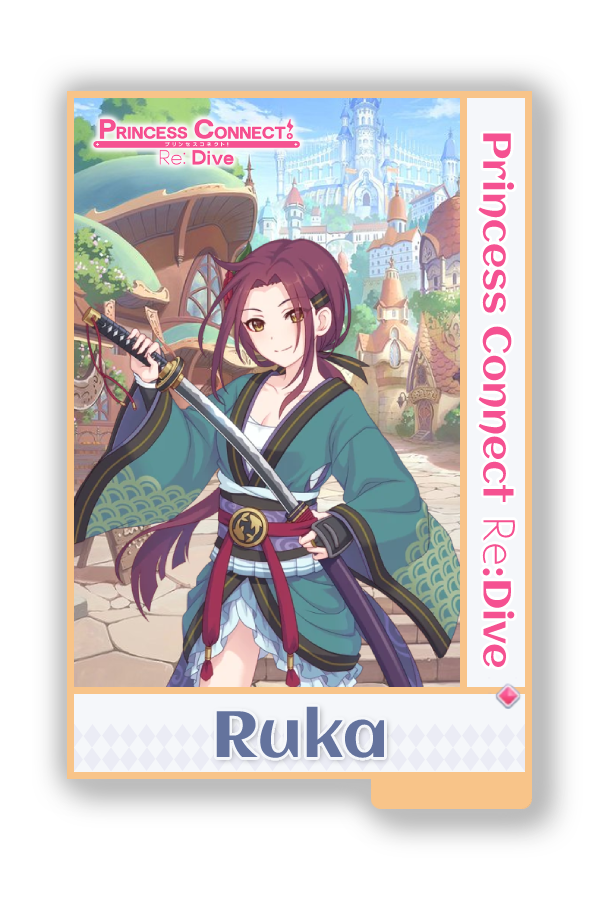
<style>
.page{position:relative;width:600px;height:900px;background:#ffffff}
.page>*{position:absolute;margin:0}
.t1{font:39px "Aclonica-Regular";color:#f55191}
.t2{font:39px "AaarghNormal";color:#f55191}
.t3{font:65px "Aclonica-Regular";color:#64739d}
</style>
<div class="page">
<p class="t1" style="left:478px;top:133px;width:38px;height:534px;rotate:90deg">Princess Connect <span class="t2">Re</span>:Dive</p>
<p class="t3" style="left:216px;top:706px;width:168px;height:52px">Ruka</p>
</div>
